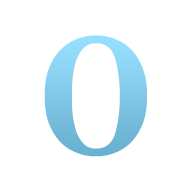
<style>
.page{position:relative;width:192px;height:192px;background:#ffffff}
.page>*{position:absolute;margin:0}
.t1{font:164.4px "PerpetuaTitlingMT-Bold";color:#81c7e8}
</style>
<div class="page">
<p class="t1" style="left:44px;top:35px;width:103px;height:122px">0</p>
</div>
